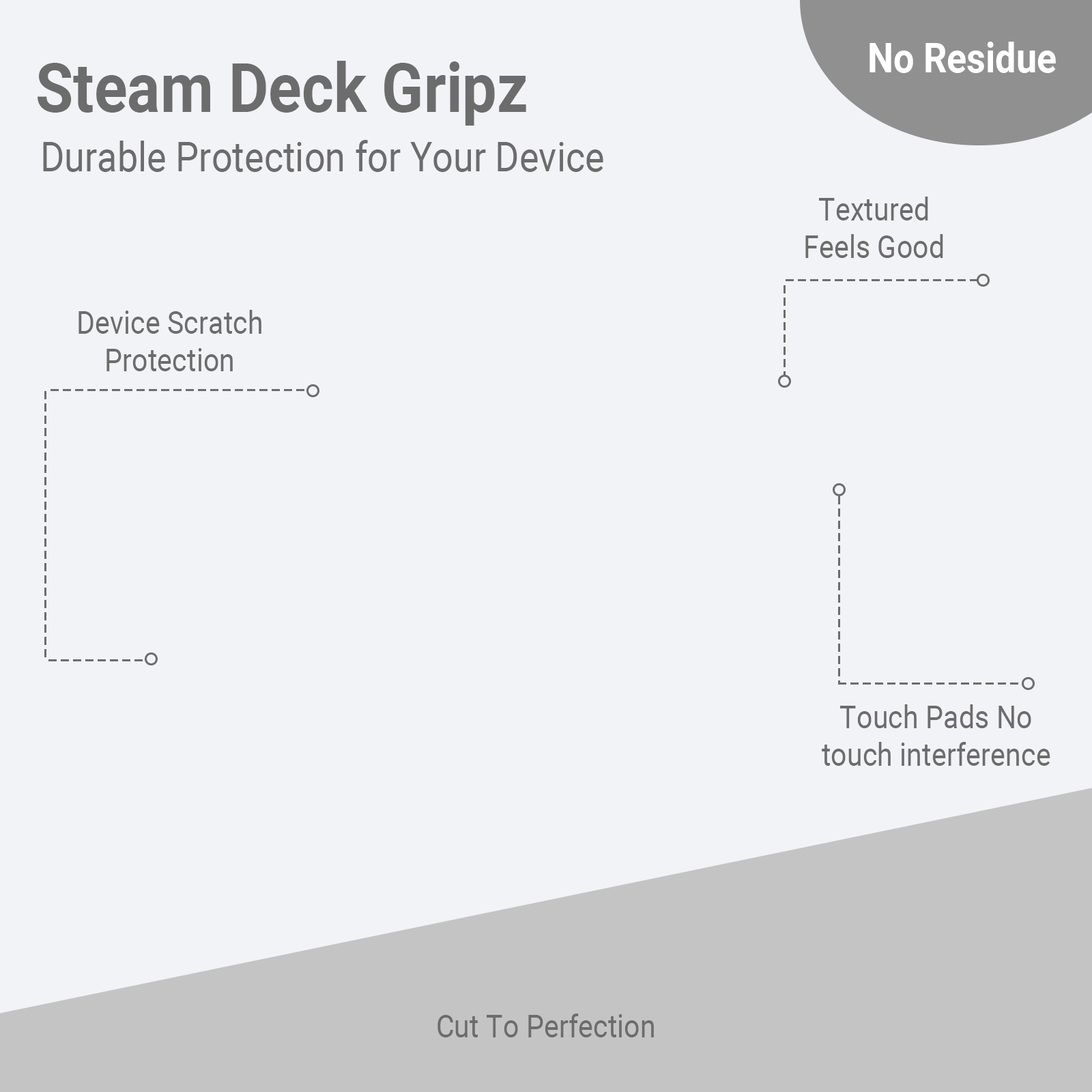
<style>
.page{position:relative;width:1092px;height:1092px;background:#f2f3f6}
.page>*{position:absolute;margin:0}
.t1{font:40.9px "Roboto-Bold";color:#ffffff;scale:0.9 1}
.t2{font:68.2px "Roboto-Bold";color:#6c6c6c;scale:0.9 1}
.t3{font:40.9px "Roboto-Regular";color:#6c6c6c;scale:0.9 1}
.t4{font:31.4px "Roboto-Regular";color:#6c6c6c;scale:0.9 1}
</style>
<div class="page">
<p class="t1" style="left:869px;top:42px;width:187px;height:31px">No Residue</p>
<p class="t2" style="left:38px;top:61px;width:488px;height:65px">Steam Deck Gripz</p>
<p class="t3" style="left:43px;top:140px;width:560px;height:32px">Durable Protection for Your Device</p>
<p class="t4" style="left:805px;top:197px;width:138px;height:61px;text-align:center">Textured<br>Feels Good</p>
<p class="t4" style="left:78px;top:310px;width:183px;height:61px;text-align:center">Device Scratch<br>Protection</p>
<p class="t4" style="left:822px;top:704px;width:228px;height:62px;text-align:center">Touch Pads No<br>touch interference</p>
<p class="t4" style="left:437px;top:1013px;width:217px;height:24px">Cut To Perfection</p>
</div>
